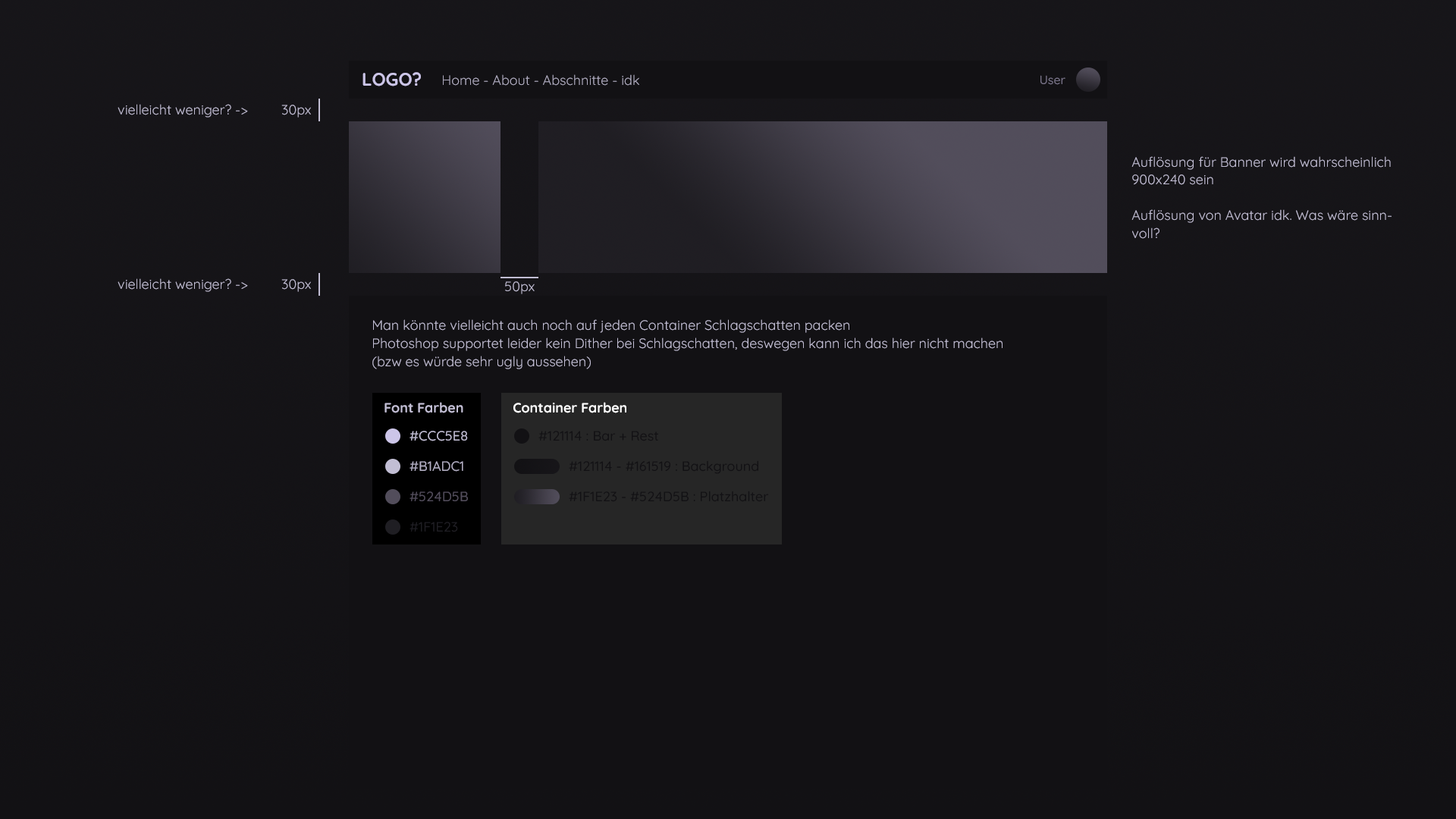
<style>
.page{position:relative;width:1456px;height:819px;background:#121114}
.page>*{position:absolute;margin:0}
.t1{font:18.2px "Quicksand-Bold";color:#ccc5e8}
.t2{font:13.6px "Quicksand-Regular";color:#b1adc1}
.t3{font:12.1px "Quicksand-Medium";color:#797489}
.t4{font:13.6px "Quicksand-Regular";color:#c2bed4}
.t5{font:13.6px "Quicksand-Bold";color:#c2bed4}
.t6{font:13.6px "Quicksand-Bold";color:#ffffff}
.t7{font:13.6px "Quicksand-Medium";color:#c2bed4}
.t8{font:13.6px "Quicksand-Medium";color:#121114}
.t9{font:13.6px "Quicksand-Medium";color:#b1adc1}
.t10{font:13.6px "Quicksand-Medium";color:#524d5b}
.t11{font:13.6px "Quicksand-Medium";color:#1f1e23}
</style>
<div class="page">
<p class="t1" style="left:362px;top:72px;width:59px;height:14px">LOGO?</p>
<p class="t2" style="left:443px;top:74px;width:196px;height:12px">Home - About - Abschnitte - idk</p>
<p class="t3" style="left:1040px;top:75px;width:25px;height:10px">User</p>
<p class="t4" style="left:118px;top:104px;width:193px;height:14px">vielleicht weniger? -&gt;  30px</p>
<p class="t4" style="left:1131px;top:156px;width:261px;height:83px">Auflösung für Banner wird wahrscheinlich<br>900x240 sein<br><br>Auflösung von Avatar idk. Was wäre sinn-<br>voll?</p>
<p class="t4" style="left:118px;top:278px;width:193px;height:14px">vielleicht weniger? -&gt;  30px</p>
<p class="t4" style="left:505px;top:281px;width:30px;height:13px">50px</p>
<p class="t4" style="left:372px;top:319px;width:631px;height:50px">Man könnte vielleicht auch noch auf jeden Container Schlagschatten packen<br>Photoshop supportet leider kein Dither bei Schlagschatten, deswegen kann ich das hier nicht machen<br>(bzw es würde sehr ugly aussehen)</p>
<p class="t5" style="left:384px;top:402px;width:79px;height:11px">Font Farben</p>
<p class="t6" style="left:513px;top:402px;width:113px;height:11px">Container Farben</p>
<p class="t7" style="left:409px;top:431px;width:59px;height:10px">#CCC5E8</p>
<p class="t8" style="left:538px;top:431px;width:120px;height:10px">#121114 : Bar + Rest</p>
<p class="t9" style="left:409px;top:461px;width:54px;height:11px">#B1ADC1</p>
<p class="t8" style="left:569px;top:460px;width:189px;height:14px">#121114 - #161519 : Background</p>
<p class="t10" style="left:409px;top:491px;width:59px;height:10px">#524D5B</p>
<p class="t8" style="left:569px;top:491px;width:200px;height:11px">#1F1E23 - #524D5B : Platzhalter</p>
<p class="t11" style="left:409px;top:522px;width:49px;height:10px">#1F1E23</p>
</div>
